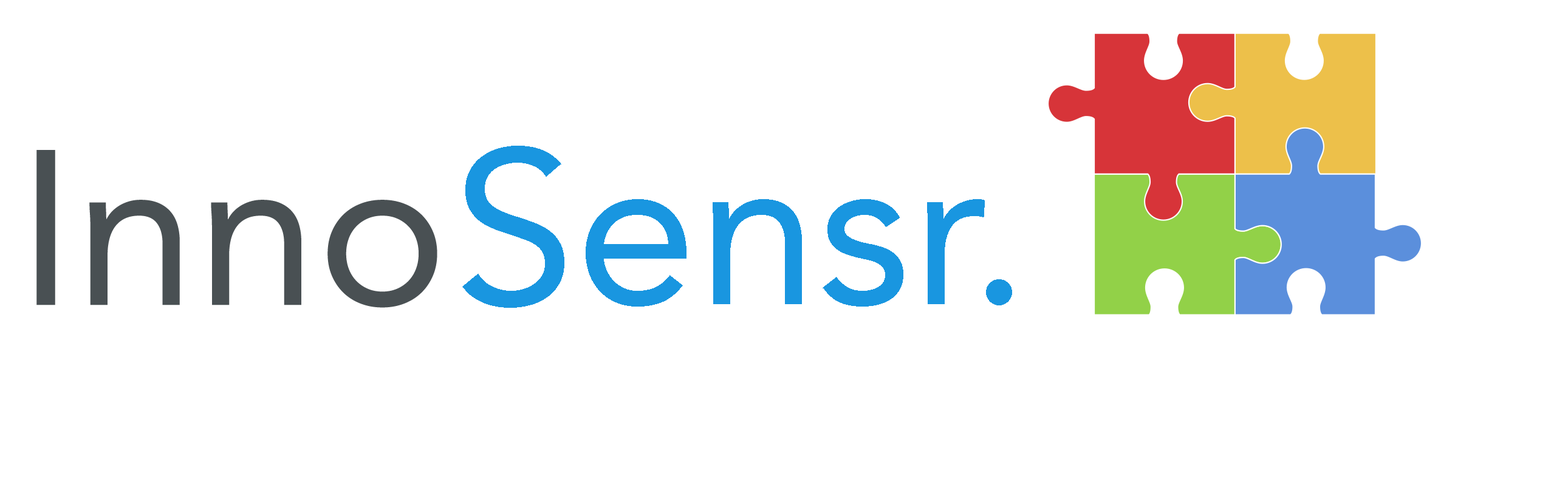
<style>
.page{position:relative;width:1568px;height:496px;background:#ffffff}
.page>*{position:absolute;margin:0}
.t1{font:218.7px "Avenir-Roman";color:#1996e0}
.t2{font:218.7px "Avenir-Roman";color:#495053}
</style>
<div class="page">
<p class="t1" style="left:462px;top:146px;width:550px;height:162px">Sensr.</p>
<p class="t2" style="left:36px;top:150px;width:401px;height:158px">Inno</p>
</div>
